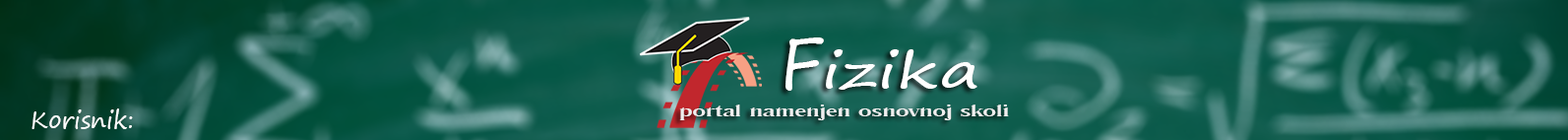
<style>
.page{position:relative;width:1568px;height:140px}
.page>*{position:absolute;margin:0}
.t1{font:46.9px "SegoePrint";color:#ffffff;scale:1.5 1}
.t2{font:70.3px "SegoePrint";color:#ffffff}
.t3{font:23.6px "SegoePrint";color:#ffffff}
.t4{font:17.7px "RomanaT-Medi";color:#efefef;scale:1.52 1}
</style>
<div class="page">
<p class="t1" style="left:785px;top:37px;width:192px;height:54px"><span class="t2">F</span>izika</p>
<p class="t3" style="left:31px;top:108px;width:102px;height:21px">Korisnik:</p>
<p class="t4" style="left:679px;top:104px;width:330px;height:16px">portal namenjen osnovnoj skoli</p>
</div>
